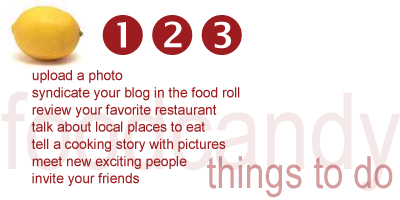
<style>
.page{position:relative;width:400px;height:200px;background:#ffffff}
.page>*{position:absolute;margin:0}
.t1{font:14.3px "ArialMT";color:#9c1c1f;scale:0.96 1}
.t2{font:44.2px "ArialNarrow";color:#d49d9e}
</style>
<div class="page">
<p class="t1" style="left:31px;top:70px;width:209px;height:116px">upload a photo<br>syndicate your blog in the food roll<br>review your favorite restaurant <br>talk about local places to eat<br>tell a cooking story with pictures<br>meet new exciting people<br>invite your friends</p>
<p class="t2" style="left:207px;top:156px;width:186px;height:42px">things to do</p>
</div>
